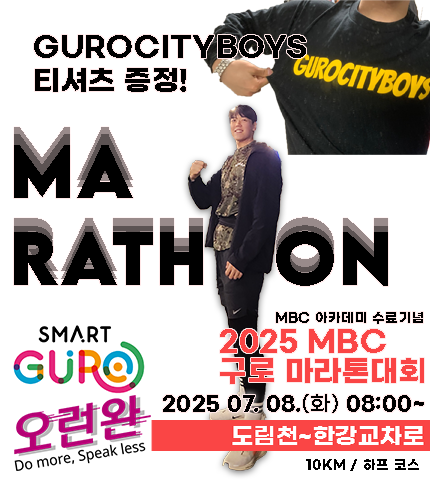
<style>
.page{position:relative;width:430px;height:500px;background:#ffffff}
.page>*{position:absolute;margin:0}
.t1{font:28px "GmarketSansTTFBold";letter-spacing:0.02em;color:#000000}
.t2{font:13px "GmarketSansTTFBold";letter-spacing:0.02em;color:#000000}
.t3{font:29px/30px "GmarketSansTTFBold";letter-spacing:0.02em;color:#fa4545}
.t4{font:21px "GmarketSansTTFBold";letter-spacing:0.02em;color:#000000}
.t5{font:21px "GmarketSansTTFMedium";letter-spacing:0.02em;color:#000000}
</style>
<div class="page">
<p class="t1" style="left:34px;top:35px;width:272px;height:57px">GUROCITYBOYS<br>티셔츠 증정!</p>
<p class="t2" style="left:276px;top:312px;width:147px;height:12px">MBC 아카데미 수료기념</p>
<p class="t3" style="left:220px;top:329px;width:204px;height:55px">2025 MBC<br>구로 마라톤대회</p>
<p class="t4" style="left:163px;top:394px;width:261px;height:19px">2025 07. 08.<span class="t5">(화) </span>08:00~</p>
<p class="t2" style="left:306px;top:459px;width:113px;height:12px">10KM / 하프 코스</p>
</div>
